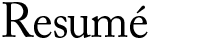
<style>
.page{position:relative;width:200px;height:50px;background:#ffffff}
.page>*{position:absolute;margin:0}
.t1{font:48px "ACaslonPro-Regular";letter-spacing:-0.025em;color:#000000}
</style>
<div class="page">
<p class="t1" style="left:2px;top:2px;width:146px;height:36px">Resumé</p>
</div>
